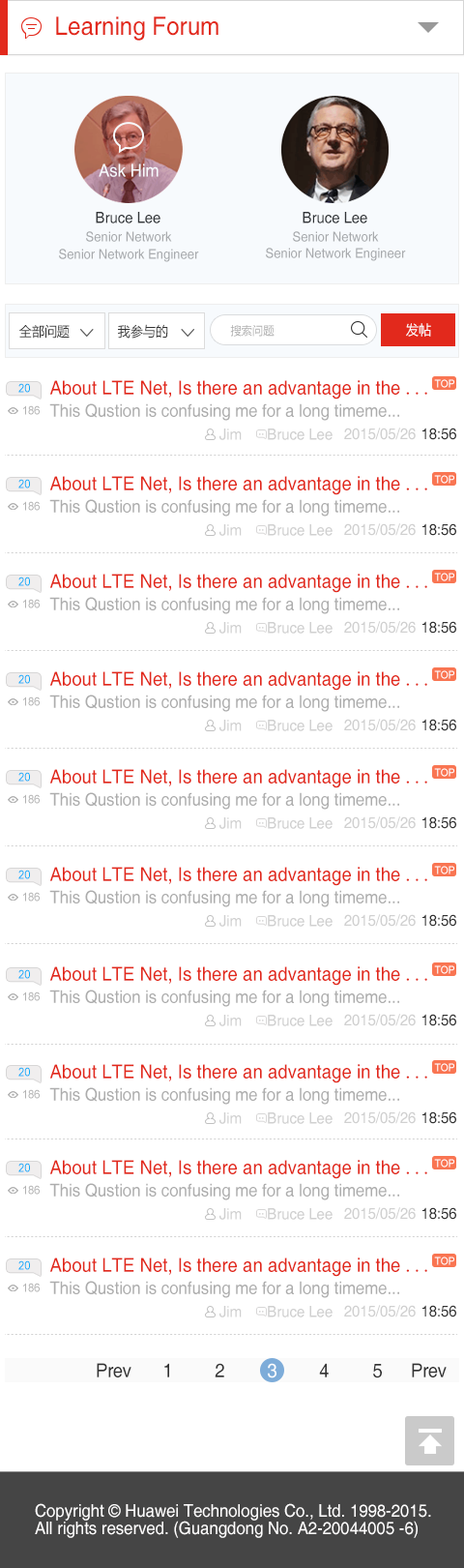
<style>
.page{position:relative;width:464px;height:1568px;background:#ffffff}
.page>*{position:absolute;margin:0}
.t1{font:25.1px "Helvetica";color:#e2291c;scale:0.93 1}
.t2{font:17.4px "Helvetica";color:#ffffff;scale:0.93 1}
.t3{font:15.5px "Helvetica";color:#333333;scale:0.93 1}
.t4{font:13.5px "Helvetica";color:#a8aaad;scale:0.93 1}
.t5{font:13.5px "MicrosoftYaHei";color:#333333;scale:0.93 1}
.t6{font:11.6px "MicrosoftYaHei";color:#adadad;scale:0.93 1}
.t7{font:13.5px "MicrosoftYaHei";color:#ffffff;scale:0.93 1}
.t8{font:11.6px "ArialMT";color:#05acfa;scale:0.93 1}
.t9{font:19.3px "Helvetica";color:#e2291c;scale:0.93 1}
.t10{font:19.3px "SimSun";color:#e2291c;scale:0.93 1}
.t11{font:10.6px "ArialMT";color:#ffffff;scale:0.93 1}
.t12{font:11.6px "ArialMT";color:#b2b2b2;scale:0.93 1}
.t13{font:17.4px "Helvetica";color:#adadad;scale:0.93 1}
.t14{font:15.5px "Helvetica";color:#d0d0d0;scale:0.93 1}
.t15{font:19.3px "Helvetica";letter-spacing:-0.025em;color:#333333;scale:0.93 1}
.t16{font:19.3px "Helvetica";letter-spacing:-0.025em;color:#ffffff;scale:0.93 1}
.t17{font:17.4px/17.4px "Helvetica";color:#fffefe;scale:0.93 1}
</style>
<div class="page">
<p class="t1" style="left:56px;top:16px;width:163px;height:25px">Learning Forum</p>
<p class="t2" style="left:99px;top:163px;width:60px;height:14px">Ask Him</p>
<p class="t3" style="left:96px;top:212px;width:65px;height:11px">Bruce Lee</p>
<p class="t3" style="left:303px;top:212px;width:65px;height:11px">Bruce Lee</p>
<p class="t4" style="left:86px;top:231px;width:86px;height:11px">Senior Network</p>
<p class="t4" style="left:293px;top:231px;width:86px;height:11px">Senior Network</p>
<p class="t4" style="left:59px;top:249px;width:140px;height:13px">Senior Network Engineer</p>
<p class="t4" style="left:266px;top:248px;width:140px;height:13px">Senior Network Engineer</p>
<p class="t5" style="left:19px;top:324px;width:51px;height:15px">全部问题</p>
<p class="t5" style="left:118px;top:324px;width:50px;height:15px">我参与的</p>
<p class="t6" style="left:230px;top:325px;width:45px;height:12px">搜索问题</p>
<p class="t7" style="left:406px;top:323px;width:25px;height:14px">发帖</p>
<p class="t8" style="left:18px;top:383px;width:12px;height:10px">20</p>
<p class="t9" style="left:49px;top:380px;width:379px;height:19px">About LTE Net, Is there an advantage in the <span class="t10">...</span></p>
<p class="t11" style="left:434px;top:379px;width:21px;height:9px">TOP</p>
<p class="t12" style="left:23px;top:405px;width:17px;height:10px">186</p>
<p class="t13" style="left:49px;top:403px;width:350px;height:18px">This Qustion is confusing me for a long timeme...</p>
<p class="t14" style="left:220px;top:429px;width:22px;height:11px">Jim</p>
<p class="t14" style="left:268px;top:429px;width:65px;height:11px">Bruce Lee</p>
<p class="t14" style="left:344px;top:428px;width:72px;height:12px">2015/05/26</p>
<p class="t3" style="left:423px;top:428px;width:34px;height:12px">18:56</p>
<p class="t8" style="left:18px;top:479px;width:12px;height:9px">20</p>
<p class="t9" style="left:49px;top:476px;width:379px;height:19px">About LTE Net, Is there an advantage in the <span class="t10">...</span></p>
<p class="t11" style="left:434px;top:475px;width:21px;height:9px">TOP</p>
<p class="t12" style="left:23px;top:501px;width:17px;height:10px">186</p>
<p class="t13" style="left:49px;top:499px;width:350px;height:18px">This Qustion is confusing me for a long timeme...</p>
<p class="t14" style="left:220px;top:524px;width:22px;height:12px">Jim</p>
<p class="t14" style="left:268px;top:524px;width:65px;height:12px">Bruce Lee</p>
<p class="t14" style="left:344px;top:523px;width:72px;height:13px">2015/05/26</p>
<p class="t3" style="left:423px;top:523px;width:34px;height:13px">18:56</p>
<p class="t8" style="left:18px;top:577px;width:12px;height:9px">20</p>
<p class="t9" style="left:49px;top:574px;width:379px;height:19px">About LTE Net, Is there an advantage in the <span class="t10">...</span></p>
<p class="t11" style="left:434px;top:573px;width:21px;height:8px">TOP</p>
<p class="t12" style="left:23px;top:599px;width:17px;height:9px">186</p>
<p class="t13" style="left:49px;top:597px;width:350px;height:17px">This Qustion is confusing me for a long timeme...</p>
<p class="t14" style="left:220px;top:622px;width:22px;height:12px">Jim</p>
<p class="t14" style="left:268px;top:622px;width:65px;height:12px">Bruce Lee</p>
<p class="t14" style="left:344px;top:621px;width:72px;height:13px">2015/05/26</p>
<p class="t3" style="left:423px;top:621px;width:34px;height:13px">18:56</p>
<p class="t8" style="left:18px;top:674px;width:12px;height:10px">20</p>
<p class="t9" style="left:49px;top:671px;width:379px;height:20px">About LTE Net, Is there an advantage in the <span class="t10">...</span></p>
<p class="t11" style="left:434px;top:670px;width:21px;height:9px">TOP</p>
<p class="t12" style="left:23px;top:696px;width:17px;height:10px">186</p>
<p class="t13" style="left:49px;top:695px;width:350px;height:17px">This Qustion is confusing me for a long timeme...</p>
<p class="t14" style="left:220px;top:720px;width:22px;height:11px">Jim</p>
<p class="t14" style="left:268px;top:720px;width:65px;height:11px">Bruce Lee</p>
<p class="t14" style="left:344px;top:719px;width:72px;height:12px">2015/05/26</p>
<p class="t3" style="left:423px;top:719px;width:34px;height:12px">18:56</p>
<p class="t8" style="left:18px;top:772px;width:12px;height:10px">20</p>
<p class="t9" style="left:49px;top:769px;width:379px;height:19px">About LTE Net, Is there an advantage in the <span class="t10">...</span></p>
<p class="t11" style="left:434px;top:768px;width:21px;height:9px">TOP</p>
<p class="t12" style="left:23px;top:794px;width:17px;height:10px">186</p>
<p class="t13" style="left:49px;top:792px;width:350px;height:18px">This Qustion is confusing me for a long timeme...</p>
<p class="t14" style="left:220px;top:817px;width:22px;height:12px">Jim</p>
<p class="t14" style="left:268px;top:817px;width:65px;height:12px">Bruce Lee</p>
<p class="t14" style="left:344px;top:816px;width:72px;height:13px">2015/05/26</p>
<p class="t3" style="left:423px;top:816px;width:34px;height:13px">18:56</p>
<p class="t8" style="left:18px;top:870px;width:12px;height:9px">20</p>
<p class="t9" style="left:49px;top:867px;width:379px;height:19px">About LTE Net, Is there an advantage in the <span class="t10">...</span></p>
<p class="t11" style="left:434px;top:866px;width:21px;height:8px">TOP</p>
<p class="t12" style="left:23px;top:892px;width:17px;height:10px">186</p>
<p class="t13" style="left:49px;top:890px;width:350px;height:17px">This Qustion is confusing me for a long timeme...</p>
<p class="t14" style="left:220px;top:915px;width:22px;height:12px">Jim</p>
<p class="t14" style="left:268px;top:915px;width:65px;height:12px">Bruce Lee</p>
<p class="t14" style="left:344px;top:914px;width:72px;height:13px">2015/05/26</p>
<p class="t3" style="left:423px;top:914px;width:34px;height:13px">18:56</p>
<p class="t11" style="left:434px;top:965px;width:21px;height:9px">TOP</p>
<p class="t8" style="left:18px;top:969px;width:12px;height:10px">20</p>
<p class="t9" style="left:49px;top:966px;width:379px;height:20px">About LTE Net, Is there an advantage in the <span class="t10">...</span></p>
<p class="t13" style="left:49px;top:990px;width:350px;height:17px">This Qustion is confusing me for a long timeme...</p>
<p class="t12" style="left:23px;top:991px;width:17px;height:10px">186</p>
<p class="t14" style="left:344px;top:1014px;width:72px;height:12px">2015/05/26</p>
<p class="t3" style="left:423px;top:1014px;width:34px;height:12px">18:56</p>
<p class="t14" style="left:220px;top:1015px;width:22px;height:11px">Jim</p>
<p class="t14" style="left:268px;top:1015px;width:65px;height:11px">Bruce Lee</p>
<p class="t8" style="left:18px;top:1067px;width:12px;height:10px">20</p>
<p class="t9" style="left:49px;top:1064px;width:379px;height:19px">About LTE Net, Is there an advantage in the <span class="t10">...</span></p>
<p class="t11" style="left:434px;top:1063px;width:21px;height:9px">TOP</p>
<p class="t12" style="left:23px;top:1089px;width:17px;height:10px">186</p>
<p class="t13" style="left:49px;top:1087px;width:350px;height:18px">This Qustion is confusing me for a long timeme...</p>
<p class="t14" style="left:220px;top:1112px;width:22px;height:12px">Jim</p>
<p class="t14" style="left:268px;top:1112px;width:65px;height:12px">Bruce Lee</p>
<p class="t14" style="left:344px;top:1111px;width:72px;height:13px">2015/05/26</p>
<p class="t3" style="left:423px;top:1111px;width:34px;height:13px">18:56</p>
<p class="t8" style="left:18px;top:1163px;width:12px;height:9px">20</p>
<p class="t9" style="left:49px;top:1160px;width:379px;height:19px">About LTE Net, Is there an advantage in the <span class="t10">...</span></p>
<p class="t11" style="left:434px;top:1159px;width:21px;height:9px">TOP</p>
<p class="t12" style="left:23px;top:1185px;width:17px;height:10px">186</p>
<p class="t13" style="left:49px;top:1183px;width:350px;height:17px">This Qustion is confusing me for a long timeme...</p>
<p class="t14" style="left:220px;top:1208px;width:22px;height:12px">Jim</p>
<p class="t14" style="left:268px;top:1208px;width:65px;height:12px">Bruce Lee</p>
<p class="t14" style="left:344px;top:1207px;width:72px;height:13px">2015/05/26</p>
<p class="t3" style="left:423px;top:1207px;width:34px;height:13px">18:56</p>
<p class="t8" style="left:18px;top:1260px;width:12px;height:10px">20</p>
<p class="t9" style="left:49px;top:1257px;width:379px;height:20px">About LTE Net, Is there an advantage in the <span class="t10">...</span></p>
<p class="t11" style="left:434px;top:1257px;width:21px;height:8px">TOP</p>
<p class="t12" style="left:23px;top:1283px;width:17px;height:9px">186</p>
<p class="t13" style="left:49px;top:1281px;width:350px;height:17px">This Qustion is confusing me for a long timeme...</p>
<p class="t14" style="left:220px;top:1306px;width:22px;height:11px">Jim</p>
<p class="t14" style="left:268px;top:1306px;width:65px;height:11px">Bruce Lee</p>
<p class="t14" style="left:344px;top:1305px;width:72px;height:12px">2015/05/26</p>
<p class="t3" style="left:423px;top:1305px;width:34px;height:12px">18:56</p>
<p class="t15" style="left:97px;top:1363px;width:35px;height:14px">Prev</p>
<p class="t15" style="left:164px;top:1363px;width:5px;height:14px">1</p>
<p class="t15" style="left:215px;top:1363px;width:9px;height:14px">2</p>
<p class="t16" style="left:268px;top:1363px;width:9px;height:15px">3</p>
<p class="t15" style="left:319px;top:1363px;width:10px;height:14px">4</p>
<p class="t15" style="left:373px;top:1364px;width:9px;height:14px">5</p>
<p class="t15" style="left:412px;top:1363px;width:35px;height:14px">Prev</p>
<p class="t17" style="left:35px;top:1503px;width:396px;height:35px">Copyright © Huawei Technologies Co., Ltd. 1998-2015. <br>All rights reserved. (Guangdong No. A2-20044005 -6)</p>
</div>
